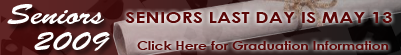
<style>
.page{position:relative;width:401px;height:55px}
.page>*{position:absolute;margin:0}
.t1{font:28.2px "BrushScriptStd";color:#ffffff;scale:1.18 1}
.t2{font:16.5px "CenturyGothic-Bold";color:#5a0707;scale:1.18 1}
.t3{font:11.8px "CenturyGothic-Bold";color:#5a0707;scale:1.18 1}
</style>
<div class="page">
<p class="t1" style="left:7px;top:4px;width:97px;height:20px">Seniors</p>
<p class="t2" style="left:125px;top:12px;width:267px;height:11px">SENIORS LAST DAY IS MAY 13</p>
<p class="t1" style="left:34px;top:32px;width:76px;height:19px">2009</p>
<p class="t3" style="left:137px;top:41px;width:252px;height:9px">Click Here for Graduation Information</p>
</div>
